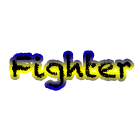
<style>
.page{position:relative;width:140px;height:140px;background:#ffffff}
.page>*{position:absolute;margin:0}
.t1{font:30px "Chalkduster";color:#000000}
</style>
<div class="page">
<p class="t1" style="left:11px;top:53px;width:121px;height:35px">Fighter</p>
</div>
